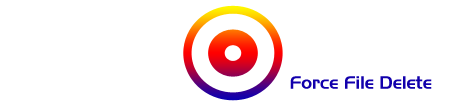
<style>
.page{position:relative;width:453px;height:106px;background:#ffffff}
.page>*{position:absolute;margin:0}
.t1{font:18px "Slicker";color:#1200ac}
</style>
<div class="page">
<p class="t1" style="left:290px;top:76px;width:142px;height:13px">Force File Delete</p>
</div>
